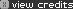
<style>
.page{position:relative;width:73px;height:9px;background:#333333}
.page>*{position:absolute;margin:0}
.t1{font:8px "PFTempestaSeven";color:#ffffff}
</style>
<div class="page">
<p class="t1" style="left:12px;top:1px;width:61px;height:7px">view credits</p>
</div>
